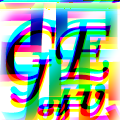
<style>
.page{position:relative;width:120px;height:120px}
.page>*{position:absolute;margin:0}
.t1{font:92px "MonotypeCorsiva";letter-spacing:-0.02em}
.t2{font:36px "Magneto-Bold";letter-spacing:-0.02em}
</style>
<div class="page">
<p class="t1" style="left:5px;top:16px;width:106px;height:78px">GE</p>
<p class="t2" style="left:37px;top:81px;width:69px;height:33px">ofU</p>
</div>
